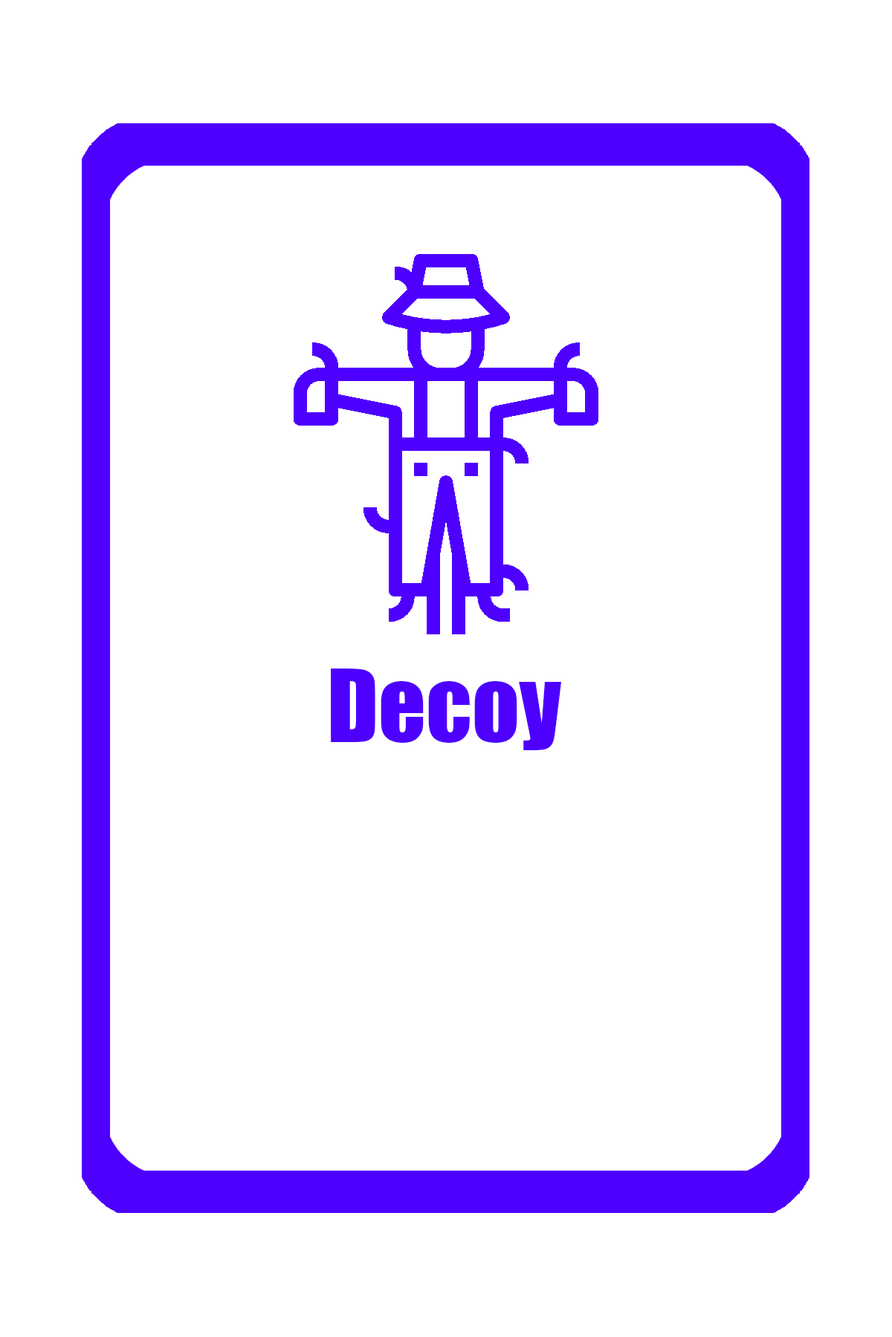
<style>
.page{position:relative;width:892px;height:1337px;background:#ffffff}
.page>*{position:absolute;margin:0}
.t1{font:92.9px "Impact";color:#4e00ff}
</style>
<div class="page">
<p class="t1" style="left:331px;top:669px;width:231px;height:81px">Decoy</p>
</div>
